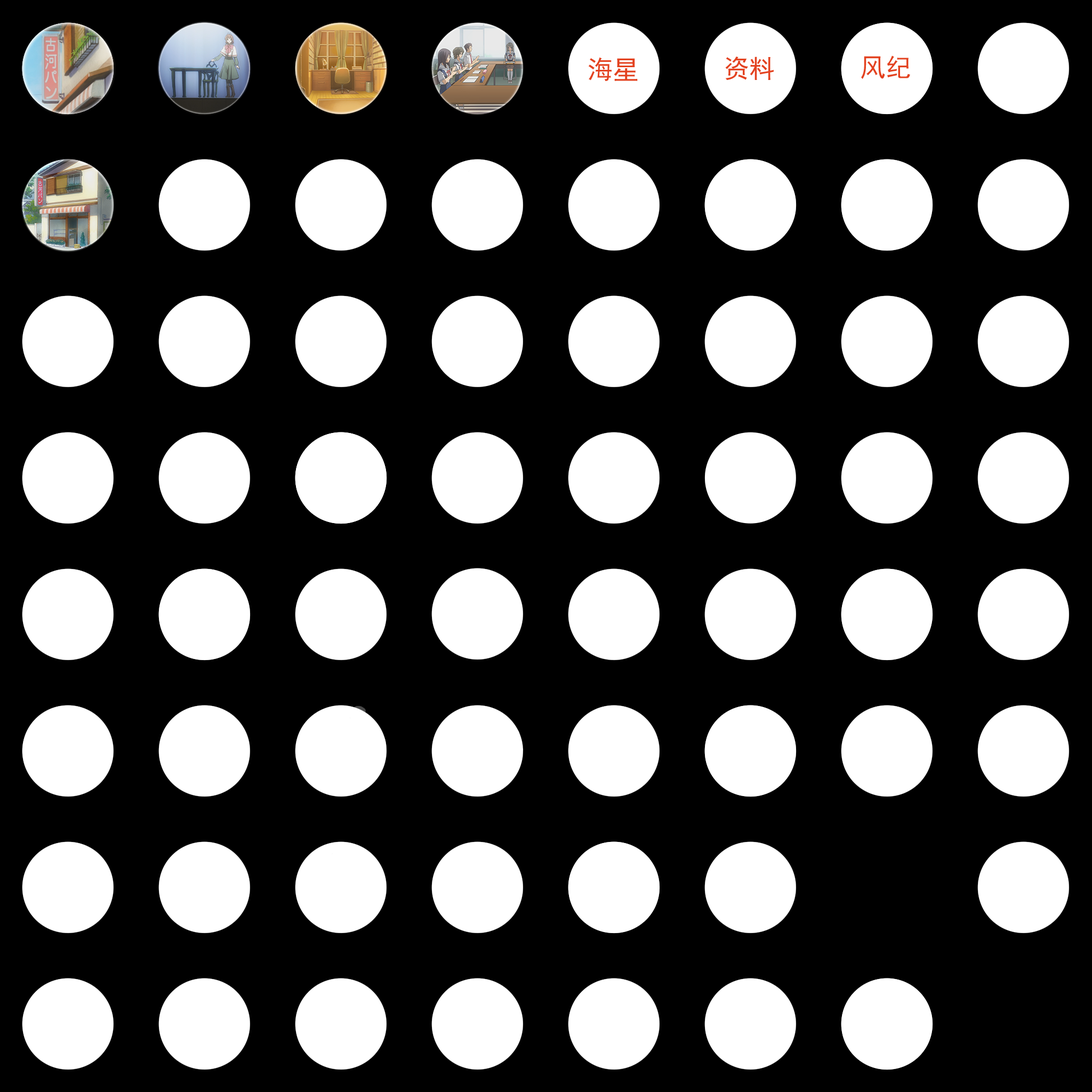
<style>
.page{position:relative;width:1092px;height:1092px;background:#000000}
.page>*{position:absolute;margin:0}
.t1{font:25.6px "SimHei";color:#e34220}
</style>
<div class="page">
<p class="t1" style="left:588px;top:57px;width:50px;height:24px">海星</p>
<p class="t1" style="left:725px;top:57px;width:49px;height:23px">资料</p>
<p class="t1" style="left:861px;top:55px;width:49px;height:24px">风纪</p>
</div>
